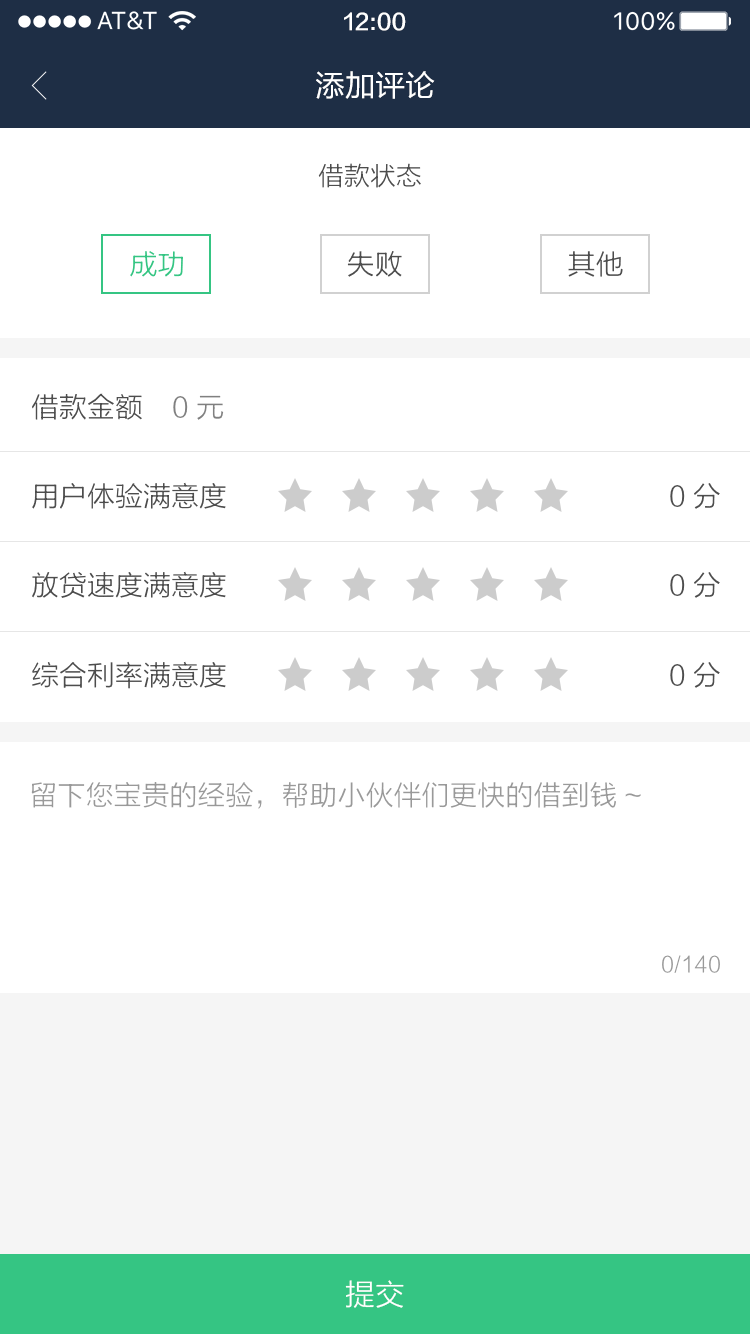
<style>
.page{position:relative;width:750px;height:1334px;background:#ffffff}
.page>*{position:absolute;margin:0}
.t1{font:22px "FZLTZHK--GBK1-0";color:#ffffff}
.t2{font:30px "FZLTHJW--GB1-0";color:#ffffff}
.t3{font:26px "FZLTXHK";color:#4d4d4d}
.t4{font:28px "FZLTXHK";color:#35c583}
.t5{font:28px "FZLTXHK";color:#4d4d4d}
.t6{font:28px "FZLTXHK";color:#808080}
.t7{font:28px "FZLTXHK";color:#999999}
.t8{font:22px "FZLTXHK";color:#999999}
.t9{font:30px "FZLTXHK";color:#ffffff}
</style>
<div class="page">
<p class="t1" style="left:344px;top:12px;width:62px;height:19px">12:00</p>
<p class="t2" style="left:316px;top:71px;width:119px;height:28px">添加评论</p>
<p class="t3" style="left:318px;top:163px;width:103px;height:25px">借款状态</p>
<p class="t4" style="left:130px;top:251px;width:53px;height:26px">成功</p>
<p class="t5" style="left:347px;top:251px;width:55px;height:26px">失败</p>
<p class="t5" style="left:568px;top:251px;width:55px;height:26px">其他</p>
<p class="t5" style="left:32px;top:393px;width:110px;height:27px">借款金额</p>
<p class="t6" style="left:173px;top:395px;width:51px;height:25px">0元</p>
<p class="t5" style="left:32px;top:482px;width:194px;height:27px">用户体验满意度</p>
<p class="t5" style="left:670px;top:483px;width:50px;height:26px">0分</p>
<p class="t5" style="left:32px;top:571px;width:194px;height:27px">放贷速度满意度</p>
<p class="t5" style="left:670px;top:572px;width:50px;height:26px">0分</p>
<p class="t5" style="left:32px;top:661px;width:194px;height:28px">综合利率满意度</p>
<p class="t5" style="left:670px;top:662px;width:50px;height:26px">0分</p>
<p class="t7" style="left:31px;top:782px;width:610px;height:27px">留下您宝贵的经验，帮助小伙伴们更快的借到钱~</p>
<p class="t8" style="left:662px;top:955px;width:58px;height:18px">0/140</p>
<p class="t9" style="left:345px;top:1280px;width:59px;height:28px">提交</p>
</div>
